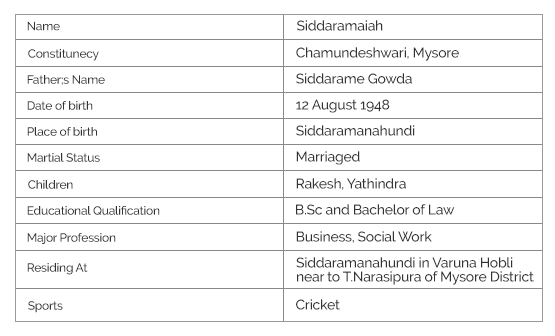
<style>
.page{position:relative;width:555px;height:336px;background:#ffffff}
.page>*{position:absolute;margin:0}
.t1{font:12px "Raleway-Medium";letter-spacing:-0.02em;color:#333333}
.t2{font:14px "Raleway-Medium";letter-spacing:-0.02em;color:#333333}
.t3{font:14px/14px "Raleway-Medium";letter-spacing:-0.02em;color:#333333}
</style>
<div class="page">
<p class="t1" style="left:27px;top:21px;width:33px;height:10px">Name</p>
<p class="t2" style="left:297px;top:20px;width:86px;height:11px">Siddaramaiah</p>
<p class="t1" style="left:28px;top:49px;width:71px;height:12px">Constitunecy</p>
<p class="t2" style="left:296px;top:47px;width:163px;height:14px">Chamundeshwari, Mysore</p>
<p class="t1" style="left:27px;top:75px;width:78px;height:10px">Father;s Name</p>
<p class="t2" style="left:296px;top:73px;width:116px;height:11px">Siddarame Gowda</p>
<p class="t1" style="left:27px;top:100px;width:66px;height:10px">Date of birth</p>
<p class="t2" style="left:296px;top:99px;width:94px;height:14px">12 August 1948</p>
<p class="t1" style="left:27px;top:126px;width:70px;height:10px">Place of birth</p>
<p class="t2" style="left:296px;top:125px;width:119px;height:11px">Siddaramanahundi</p>
<p class="t1" style="left:27px;top:153px;width:73px;height:9px">Martial Status</p>
<p class="t2" style="left:296px;top:151px;width:64px;height:14px">Marriaged</p>
<p class="t1" style="left:28px;top:180px;width:45px;height:9px">Children</p>
<p class="t2" style="left:296px;top:178px;width:110px;height:12px">Rakesh, Yathindra</p>
<p class="t1" style="left:27px;top:205px;width:133px;height:10px">Educational Qualification</p>
<p class="t2" style="left:296px;top:204px;width:159px;height:11px">B.Sc and Bachelor of Law</p>
<p class="t1" style="left:27px;top:232px;width:89px;height:12px">Major Profession</p>
<p class="t2" style="left:296px;top:231px;width:136px;height:12px">Business, Social Work</p>
<p class="t3" style="left:296px;top:257px;width:238px;height:28px">Siddaramanahundi in Varuna Hobli <br>  near to T.Narasipura of Mysore District</p>
<p class="t1" style="left:27px;top:263px;width:61px;height:12px">Residing At</p>
<p class="t1" style="left:28px;top:301px;width:35px;height:12px">Sports</p>
<p class="t2" style="left:296px;top:299px;width:44px;height:11px">Cricket</p>
</div>
